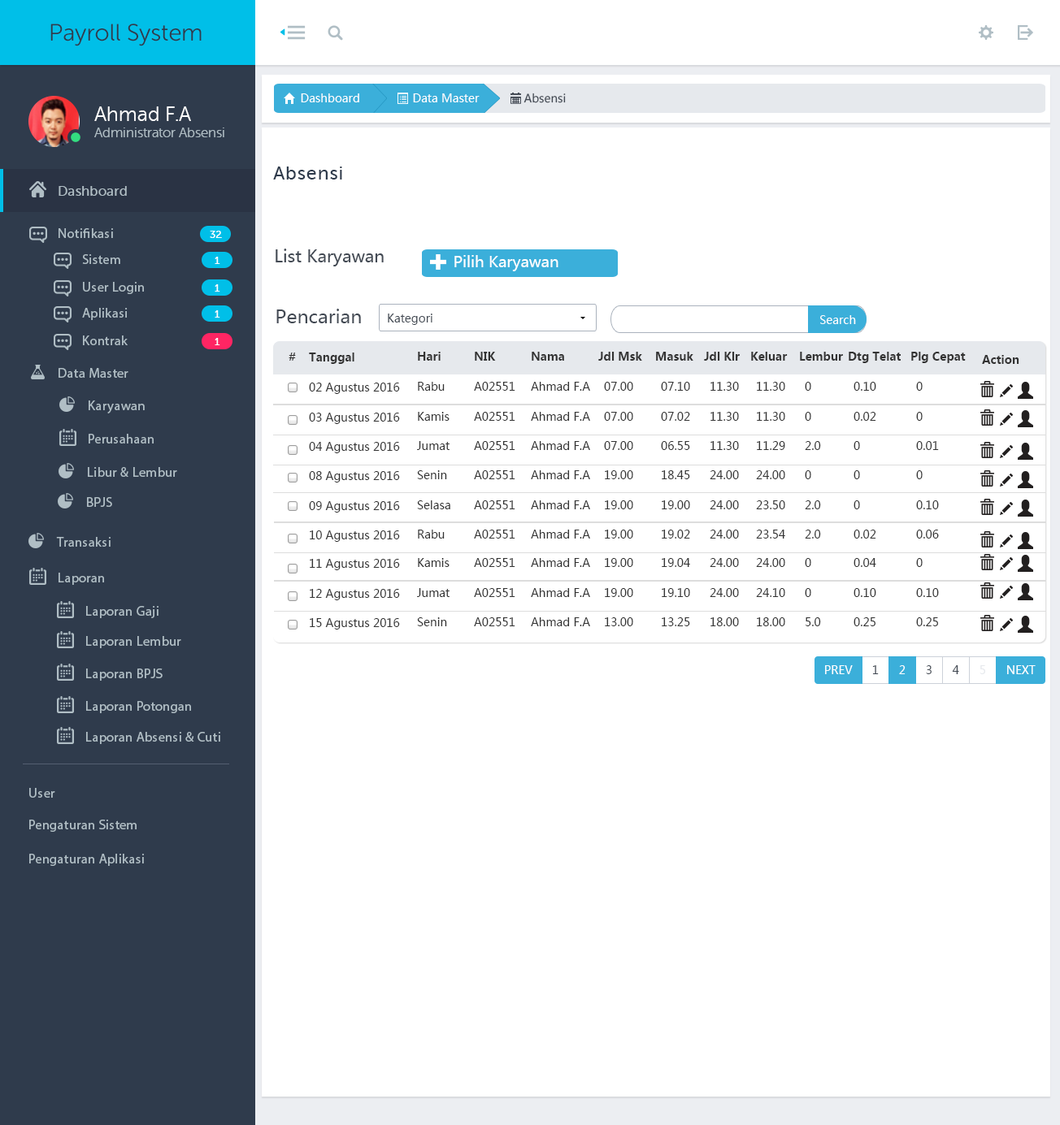
<style>
.page{position:relative;width:1060px;height:1125px;background:#ffffff}
.page>*{position:absolute;margin:0}
.t1{font:23.7px "MuseoSansRounded-300";color:#2f3b4c}
.t2{font:11.4px "MicrosoftYaHei";color:#ffffff}
.t3{font:11.2px "MicrosoftYaHei";color:#434a54}
.t4{font:13.5px "MuseoSansRounded-300";color:#b0bec5}
.t5{font:20.3px "MuseoSansRounded-300";color:#ffffff}
.t6{font:18.6px "MuseoSans-500";letter-spacing:0.04em;color:#2f3b4c}
.t7{font:13.5px "MuseoSans-500";letter-spacing:0.02em;color:#b0bec5}
.t8{font:13.5px "MyriadPro-Regular";letter-spacing:0.02em;color:#b0bec5}
.t9{font:10.2px "MuseoSans-500";letter-spacing:0.02em;color:#ffffff}
.t10{font:16.9px "MicrosoftYaHei";color:#434a54}
.t11{font:15.2px "MicrosoftYaHei";color:#ffffff}
.t12{font:18.6px "MicrosoftYaHei";color:#434a54}
.t13{font:11.4px "MicrosoftYaHei";color:#434a54}
.t14{font:11.4px "MicrosoftYaHei-Bold";color:#333333}
.t15{font:11.4px "MicrosoftYaHei";color:#333333}
.t16{font:11.4px "MicrosoftYaHei";color:#e6e9ed}
</style>
<div class="page">
<p class="t1" style="left:50px;top:24px;width:152px;height:22px">Payroll System</p>
<p class="t2" style="left:301px;top:93px;width:58px;height:9px">Dashboard</p>
<p class="t2" style="left:413px;top:93px;width:66px;height:9px">Data Master</p>
<p class="t3" style="left:523px;top:93px;width:43px;height:10px">Absensi</p>
<p class="t4" style="left:94px;top:106px;width:130px;height:31px"><span class="t5">Ahmad F.A <br></span>Administrator Absensi</p>
<p class="t6" style="left:273px;top:167px;width:69px;height:13px">Absensi</p>
<p class="t7" style="left:59px;top:186px;width:68px;height:10px">Dashboard</p>
<p class="t8" style="left:59px;top:228px;width:54px;height:10px">Notifikasi</p>
<p class="t9" style="left:210px;top:231px;width:12px;height:7px">32</p>
<p class="t8" style="left:82px;top:254px;width:38px;height:10px">Sistem</p>
<p class="t9" style="left:215px;top:257px;width:5px;height:7px">1</p>
<p class="t10" style="left:275px;top:249px;width:109px;height:18px">List Karyawan</p>
<p class="t11" style="left:454px;top:255px;width:104px;height:16px">Pilih Karyawan</p>
<p class="t8" style="left:83px;top:282px;width:61px;height:12px">User Login</p>
<p class="t9" style="left:215px;top:284px;width:5px;height:8px">1</p>
<p class="t8" style="left:82px;top:308px;width:46px;height:12px">Aplikasi</p>
<p class="t9" style="left:215px;top:310px;width:5px;height:8px">1</p>
<p class="t12" style="left:276px;top:309px;width:85px;height:14px">Pencarian</p>
<p class="t13" style="left:388px;top:314px;width:44px;height:11px">Kategori</p>
<p class="t2" style="left:820px;top:315px;width:36px;height:9px">Search</p>
<p class="t8" style="left:83px;top:336px;width:45px;height:9px">Kontrak</p>
<p class="t9" style="left:215px;top:338px;width:5px;height:7px">1</p>
<p class="t14" style="left:288px;top:353px;width:8px;height:8px">#</p>
<p class="t14" style="left:309px;top:353px;width:45px;height:11px">Tanggal</p>
<p class="t14" style="left:418px;top:352px;width:22px;height:9px">Hari</p>
<p class="t14" style="left:475px;top:352px;width:21px;height:9px">NIK</p>
<p class="t14" style="left:531px;top:352px;width:33px;height:9px">Nama</p>
<p class="t14" style="left:598px;top:352px;width:44px;height:9px">Jdl Msk</p>
<p class="t14" style="left:656px;top:352px;width:37px;height:9px">Masuk</p>
<p class="t14" style="left:704px;top:352px;width:35px;height:9px">Jdl Klr</p>
<p class="t14" style="left:751px;top:352px;width:36px;height:9px">Keluar</p>
<p class="t14" style="left:800px;top:352px;width:43px;height:9px">Lembur</p>
<p class="t14" style="left:848px;top:352px;width:52px;height:11px">Dtg Telat</p>
<p class="t14" style="left:911px;top:352px;width:54px;height:11px">Plg Cepat</p>
<p class="t14" style="left:982px;top:355px;width:37px;height:9px">Action</p>
<p class="t8" style="left:59px;top:368px;width:69px;height:10px">Data Master</p>
<p class="t15" style="left:309px;top:383px;width:91px;height:11px">02 Agustus 2016</p>
<p class="t15" style="left:418px;top:382px;width:26px;height:9px">Rabu</p>
<p class="t15" style="left:474px;top:382px;width:41px;height:9px">A02551</p>
<p class="t15" style="left:531px;top:382px;width:59px;height:9px">Ahmad F.A</p>
<p class="t15" style="left:604px;top:382px;width:29px;height:9px">07.00</p>
<p class="t15" style="left:661px;top:382px;width:29px;height:9px">07.10</p>
<p class="t15" style="left:710px;top:382px;width:29px;height:9px">11.30</p>
<p class="t15" style="left:756px;top:382px;width:29px;height:9px">11.30</p>
<p class="t15" style="left:804px;top:382px;width:7px;height:9px">0</p>
<p class="t15" style="left:853px;top:382px;width:23px;height:9px">0.10</p>
<p class="t15" style="left:916px;top:382px;width:6px;height:9px">0</p>
<p class="t8" style="left:89px;top:401px;width:56px;height:13px">Karyawan</p>
<p class="t15" style="left:309px;top:413px;width:91px;height:11px">03 Agustus 2016</p>
<p class="t15" style="left:418px;top:412px;width:31px;height:9px">Kamis</p>
<p class="t15" style="left:474px;top:412px;width:41px;height:9px">A02551</p>
<p class="t15" style="left:531px;top:412px;width:59px;height:9px">Ahmad F.A</p>
<p class="t15" style="left:604px;top:412px;width:29px;height:9px">07.00</p>
<p class="t15" style="left:661px;top:412px;width:29px;height:9px">07.02</p>
<p class="t15" style="left:710px;top:412px;width:29px;height:9px">11.30</p>
<p class="t15" style="left:756px;top:412px;width:29px;height:9px">11.30</p>
<p class="t15" style="left:804px;top:412px;width:7px;height:9px">0</p>
<p class="t15" style="left:853px;top:412px;width:23px;height:9px">0.02</p>
<p class="t15" style="left:916px;top:412px;width:6px;height:9px">0</p>
<p class="t8" style="left:89px;top:434px;width:65px;height:10px">Perusahaan</p>
<p class="t15" style="left:309px;top:442px;width:91px;height:11px">04 Agustus 2016</p>
<p class="t15" style="left:417px;top:441px;width:32px;height:9px">Jumat</p>
<p class="t15" style="left:474px;top:441px;width:41px;height:9px">A02551</p>
<p class="t15" style="left:531px;top:441px;width:59px;height:9px">Ahmad F.A</p>
<p class="t15" style="left:604px;top:441px;width:29px;height:9px">07.00</p>
<p class="t15" style="left:661px;top:441px;width:29px;height:9px">06.55</p>
<p class="t15" style="left:710px;top:441px;width:29px;height:9px">11.30</p>
<p class="t15" style="left:756px;top:441px;width:29px;height:9px">11.29</p>
<p class="t15" style="left:804px;top:441px;width:17px;height:9px">2.0</p>
<p class="t15" style="left:853px;top:441px;width:7px;height:9px">0</p>
<p class="t15" style="left:916px;top:441px;width:23px;height:9px">0.01</p>
<p class="t8" style="left:88px;top:467px;width:89px;height:10px">Libur &amp; Lembur</p>
<p class="t15" style="left:309px;top:471px;width:91px;height:12px">08 Agustus 2016</p>
<p class="t15" style="left:417px;top:470px;width:30px;height:9px">Senin</p>
<p class="t15" style="left:474px;top:470px;width:41px;height:9px">A02551</p>
<p class="t15" style="left:531px;top:470px;width:59px;height:9px">Ahmad F.A</p>
<p class="t15" style="left:605px;top:470px;width:28px;height:9px">19.00</p>
<p class="t15" style="left:661px;top:470px;width:29px;height:9px">18.45</p>
<p class="t15" style="left:709px;top:470px;width:30px;height:9px">24.00</p>
<p class="t15" style="left:756px;top:470px;width:29px;height:9px">24.00</p>
<p class="t15" style="left:804px;top:470px;width:7px;height:9px">0</p>
<p class="t15" style="left:853px;top:470px;width:7px;height:9px">0</p>
<p class="t15" style="left:916px;top:470px;width:6px;height:9px">0</p>
<p class="t8" style="left:87px;top:497px;width:25px;height:10px">BPJS</p>
<p class="t15" style="left:309px;top:501px;width:91px;height:12px">09 Agustus 2016</p>
<p class="t15" style="left:417px;top:501px;width:33px;height:8px">Selasa</p>
<p class="t15" style="left:474px;top:501px;width:41px;height:8px">A02551</p>
<p class="t15" style="left:531px;top:501px;width:59px;height:8px">Ahmad F.A</p>
<p class="t15" style="left:605px;top:501px;width:28px;height:8px">19.00</p>
<p class="t15" style="left:661px;top:501px;width:29px;height:8px">19.00</p>
<p class="t15" style="left:709px;top:501px;width:30px;height:8px">24.00</p>
<p class="t15" style="left:756px;top:501px;width:29px;height:8px">23.50</p>
<p class="t15" style="left:804px;top:501px;width:17px;height:8px">2.0</p>
<p class="t15" style="left:853px;top:501px;width:7px;height:8px">0</p>
<p class="t15" style="left:916px;top:501px;width:23px;height:8px">0.10</p>
<p class="t15" style="left:310px;top:531px;width:90px;height:11px">10 Agustus 2016</p>
<p class="t15" style="left:418px;top:530px;width:26px;height:9px">Rabu</p>
<p class="t15" style="left:474px;top:530px;width:41px;height:9px">A02551</p>
<p class="t15" style="left:531px;top:530px;width:59px;height:9px">Ahmad F.A</p>
<p class="t15" style="left:605px;top:530px;width:28px;height:9px">19.00</p>
<p class="t15" style="left:661px;top:530px;width:29px;height:9px">19.02</p>
<p class="t15" style="left:709px;top:530px;width:30px;height:9px">24.00</p>
<p class="t15" style="left:756px;top:530px;width:29px;height:9px">23.54</p>
<p class="t15" style="left:804px;top:530px;width:17px;height:9px">2.0</p>
<p class="t15" style="left:853px;top:530px;width:23px;height:9px">0.02</p>
<p class="t15" style="left:916px;top:530px;width:23px;height:9px">0.06</p>
<p class="t8" style="left:56px;top:537px;width:55px;height:10px">Transaksi</p>
<p class="t15" style="left:310px;top:559px;width:90px;height:11px">11 Agustus 2016</p>
<p class="t15" style="left:418px;top:558px;width:31px;height:9px">Kamis</p>
<p class="t15" style="left:474px;top:558px;width:41px;height:9px">A02551</p>
<p class="t15" style="left:531px;top:558px;width:59px;height:9px">Ahmad F.A</p>
<p class="t15" style="left:605px;top:558px;width:28px;height:9px">19.00</p>
<p class="t15" style="left:661px;top:558px;width:29px;height:9px">19.04</p>
<p class="t15" style="left:709px;top:558px;width:30px;height:9px">24.00</p>
<p class="t15" style="left:756px;top:558px;width:29px;height:9px">24.00</p>
<p class="t15" style="left:804px;top:558px;width:7px;height:9px">0</p>
<p class="t15" style="left:853px;top:558px;width:23px;height:9px">0.04</p>
<p class="t15" style="left:916px;top:558px;width:6px;height:9px">0</p>
<p class="t8" style="left:59px;top:573px;width:45px;height:12px">Laporan</p>
<p class="t15" style="left:310px;top:589px;width:90px;height:11px">12 Agustus 2016</p>
<p class="t15" style="left:417px;top:588px;width:32px;height:9px">Jumat</p>
<p class="t15" style="left:474px;top:588px;width:41px;height:9px">A02551</p>
<p class="t15" style="left:531px;top:588px;width:59px;height:9px">Ahmad F.A</p>
<p class="t15" style="left:605px;top:588px;width:28px;height:9px">19.00</p>
<p class="t15" style="left:661px;top:588px;width:29px;height:9px">19.10</p>
<p class="t15" style="left:709px;top:588px;width:30px;height:9px">24.00</p>
<p class="t15" style="left:756px;top:588px;width:29px;height:9px">24.10</p>
<p class="t15" style="left:804px;top:588px;width:7px;height:9px">0</p>
<p class="t15" style="left:853px;top:588px;width:23px;height:9px">0.10</p>
<p class="t15" style="left:916px;top:588px;width:23px;height:9px">0.10</p>
<p class="t8" style="left:86px;top:606px;width:72px;height:12px">Laporan Gaji</p>
<p class="t15" style="left:417px;top:618px;width:30px;height:8px">Senin</p>
<p class="t15" style="left:474px;top:618px;width:41px;height:8px">A02551</p>
<p class="t15" style="left:531px;top:618px;width:59px;height:8px">Ahmad F.A</p>
<p class="t15" style="left:605px;top:618px;width:28px;height:8px">13.00</p>
<p class="t15" style="left:661px;top:618px;width:29px;height:8px">13.25</p>
<p class="t15" style="left:710px;top:618px;width:29px;height:8px">18.00</p>
<p class="t15" style="left:756px;top:618px;width:29px;height:8px">18.00</p>
<p class="t15" style="left:805px;top:618px;width:16px;height:8px">5.0</p>
<p class="t15" style="left:853px;top:618px;width:22px;height:8px">0.25</p>
<p class="t15" style="left:916px;top:618px;width:22px;height:8px">0.25</p>
<p class="t15" style="left:310px;top:618px;width:90px;height:12px">15 Agustus 2016</p>
<p class="t8" style="left:86px;top:636px;width:95px;height:12px">Laporan Lembur</p>
<p class="t2" style="left:825px;top:665px;width:27px;height:9px">PREV</p>
<p class="t13" style="left:872px;top:665px;width:6px;height:9px">1</p>
<p class="t2" style="left:899px;top:665px;width:6px;height:9px">2</p>
<p class="t13" style="left:926px;top:665px;width:5px;height:9px">3</p>
<p class="t13" style="left:952px;top:665px;width:7px;height:9px">4</p>
<p class="t16" style="left:979px;top:665px;width:6px;height:9px">5</p>
<p class="t2" style="left:1007px;top:665px;width:28px;height:9px">NEXT</p>
<p class="t8" style="left:86px;top:669px;width:77px;height:12px">Laporan BPJS</p>
<p class="t8" style="left:86px;top:701px;width:105px;height:12px">Laporan Potongan</p>
<p class="t8" style="left:86px;top:732px;width:134px;height:12px">Laporan Absensi &amp; Cuti</p>
<p class="t8" style="left:29px;top:788px;width:26px;height:10px">User</p>
<p class="t8" style="left:29px;top:820px;width:108px;height:12px">Pengaturan Sistem</p>
<p class="t8" style="left:29px;top:854px;width:115px;height:12px">Pengaturan Aplikasi</p>
</div>
